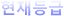
<style>
.page{position:relative;width:64px;height:16px;background:#ffffff}
.page>*{position:absolute;margin:0}
.t1{font:16px "MalgunGothicBold"}
</style>
<div class="page">
<p class="t1" style="left:1px;top:0px;width:62px;height:16px">현재등급</p>
</div>
